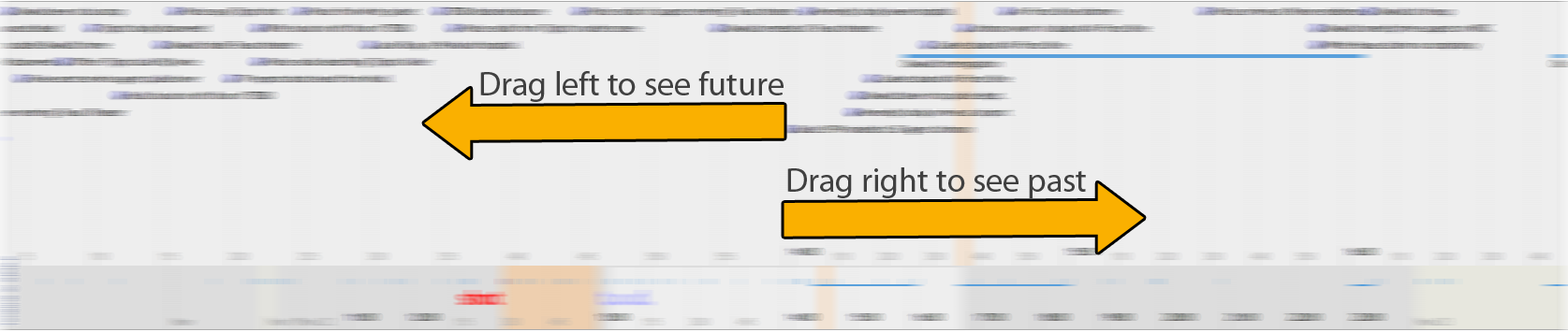
<style>
.page{position:relative;width:1568px;height:332px;background:#eeeeee}
.page>*{position:absolute;margin:0}
.t1{font:33.7px "MyriadPro-Regular";color:#404040}
</style>
<div class="page">
<p class="t1" style="left:480px;top:71px;width:304px;height:31px">Drag left to see future</p>
<p class="t1" style="left:787px;top:168px;width:299px;height:30px">Drag right to see past</p>
</div>
